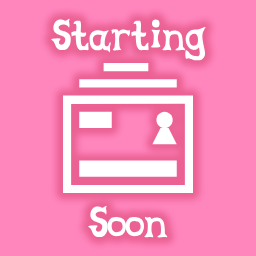
<style>
.page{position:relative;width:256px;height:256px;background:#ff85bd}
.page>*{position:absolute;margin:0}
.t1{font:45.2px "CelestiaReduxAltMedium";color:#ffffff}
</style>
<div class="page">
<p class="t1" style="left:51px;top:18px;width:155px;height:43px">Starting</p>
<p class="t1" style="left:88px;top:205px;width:80px;height:33px">Soon</p>
</div>
